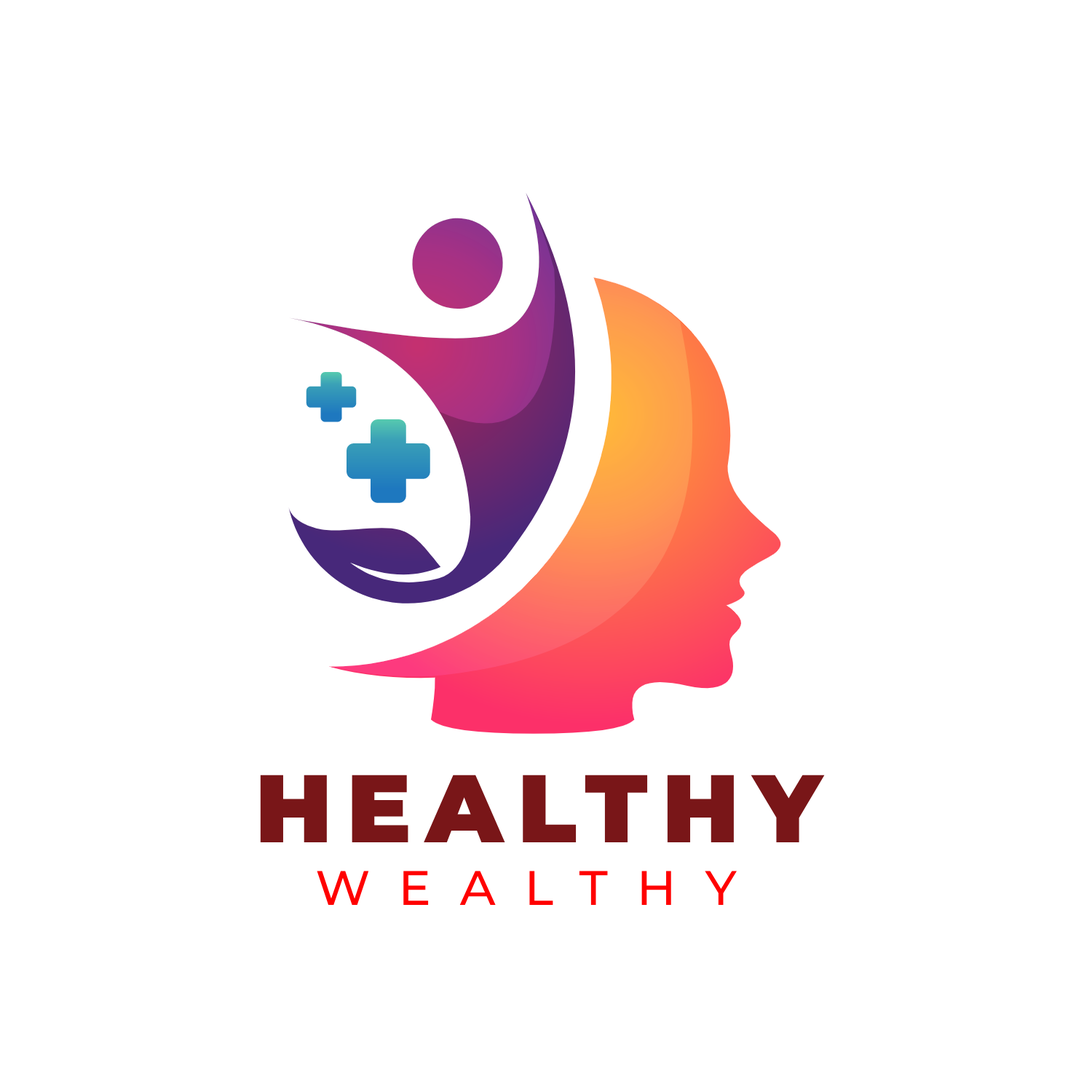
<style>
.page{position:relative;width:1092px;height:1092px;background:#ffffff}
.page>*{position:absolute;margin:0}
.t1{font:96px "Montserrat-Black";letter-spacing:0.15em;color:#791618;text-transform:uppercase}
.t2{font:48.5px "Montserrat-Medium";letter-spacing:0.6em;color:#ff0000;text-transform:uppercase}
</style>
<div class="page">
<p class="t1" style="left:260px;top:775px;width:565px;height:67px">healthy</p>
<p class="t2" style="left:317px;top:871px;width:420px;height:34px">wealthy</p>
</div>
